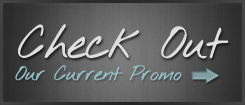
<style>
.page{position:relative;width:245px;height:105px}
.page>*{position:absolute;margin:0}
.t1{font:45px "NothingYouCouldDo";letter-spacing:-0.06em;color:#dedede;font-weight:bold}
.t2{font:20px "NothingYouCouldDo";letter-spacing:-0.06em;color:#93bdc2;font-weight:bold}
</style>
<div class="page">
<p class="t1" style="left:18px;top:24px;width:211px;height:35px">Check Out</p>
<p class="t2" style="left:15px;top:65px;width:167px;height:16px">Our Current Promo</p>
</div>
